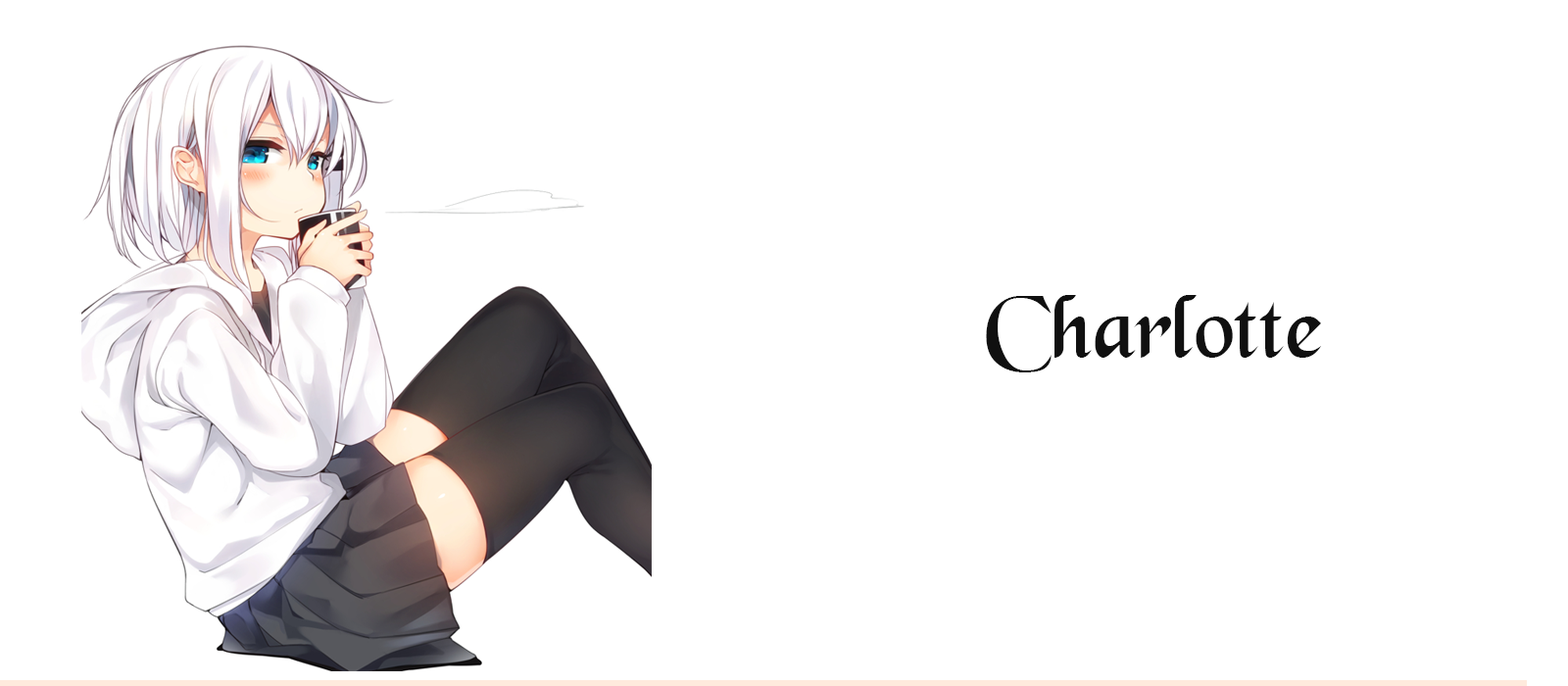
<style>
.page{position:relative;width:1568px;height:686px;background:#ffffff}
.page>*{position:absolute;margin:0}
.t1{font:93.1px "BlackChancery";color:#101010}
</style>
<div class="page">
<p class="t1" style="left:986px;top:295px;width:335px;height:77px">Charlotte</p>
</div>
